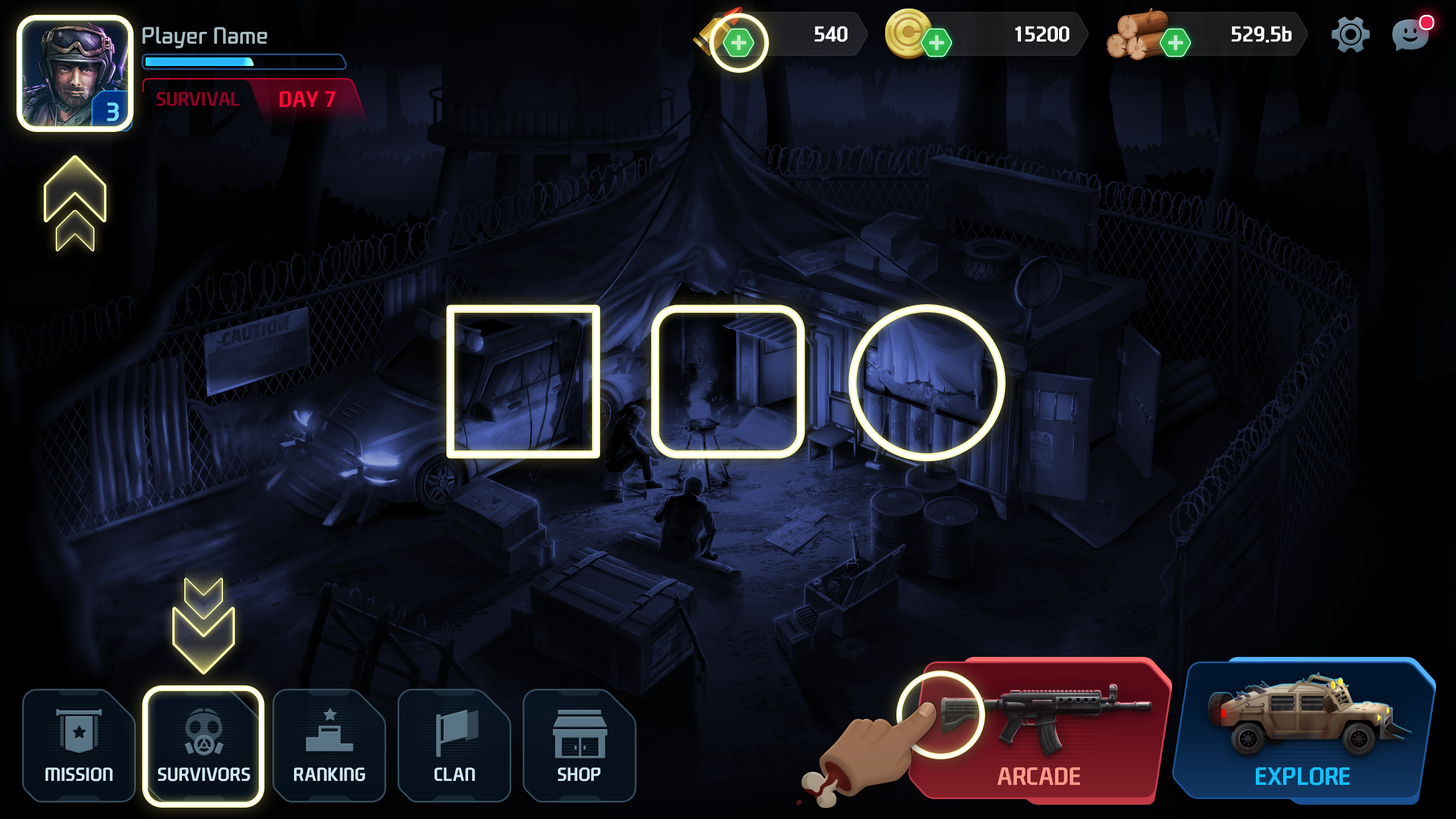
<style>
.page{position:relative;width:1456px;height:819px}
.page>*{position:absolute;margin:0}
.t1{font:22.7px "NEXONFootballGothicL";color:#a7bcc2}
.t2{font:20.7px "NEXONFootballGothicB";color:#ffffff;text-transform:uppercase}
.t3{font:20.7px "NEXONFootballGothicB";color:#ffffff}
.t4{font:18.8px "NEXONFootballGothicB";color:#900025;text-transform:uppercase}
.t5{font:21.6px "NEXONFootballGothicB";color:#ff0a38;text-transform:uppercase}
.t6{font:25px "NEXONFootballGothicB";color:#73dcff}
.t7{font:18.2px "NEXONFootballGothicB";color:#cfe7f7;text-transform:uppercase}
.t8{font:24px "NEXONFootballGothicB";color:#ff998b;text-transform:uppercase}
.t9{font:24px "NEXONFootballGothicB";color:#12c0ff;text-transform:uppercase}
</style>
<div class="page">
<p class="t1" style="left:142px;top:27px;width:125px;height:21px">Player Name</p>
<p class="t2" style="left:814px;top:26px;width:33px;height:16px">540</p>
<p class="t2" style="left:1015px;top:26px;width:54px;height:16px">15200</p>
<p class="t3" style="left:1231px;top:26px;width:61px;height:17px">529.5b</p>
<p class="t4" style="left:156px;top:92px;width:83px;height:14px">Survival</p>
<p class="t5" style="left:279px;top:91px;width:56px;height:16px">Day 7</p>
<p class="t6" style="left:107px;top:102px;width:12px;height:19px">3</p>
<p class="t7" style="left:45px;top:767px;width:68px;height:14px">mission</p>
<p class="t7" style="left:158px;top:767px;width:92px;height:14px">SURVIVORS</p>
<p class="t7" style="left:294px;top:767px;width:71px;height:14px">Ranking</p>
<p class="t7" style="left:435px;top:767px;width:40px;height:14px">clan</p>
<p class="t7" style="left:558px;top:767px;width:43px;height:14px">Shop</p>
<p class="t8" style="left:997px;top:767px;width:83px;height:18px">Arcade</p>
<p class="t9" style="left:1256px;top:767px;width:94px;height:18px">EXPLORE</p>
</div>
